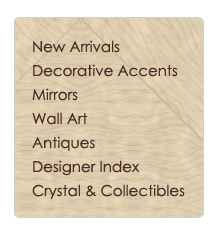
<style>
.page{position:relative;width:222px;height:236px;background:#ffffff}
.page>*{position:absolute;margin:0}
.t1{font:15px/24px "CenturyGothic";color:#4b2c27}
</style>
<div class="page">
<p class="t1" style="left:32px;top:40px;width:153px;height:159px">New Arrivals<br>Decorative Accents<br>Mirrors<br>Wall Art<br>Antiques<br>Designer Index<br>Crystal &amp; Collectibles</p>
</div>
